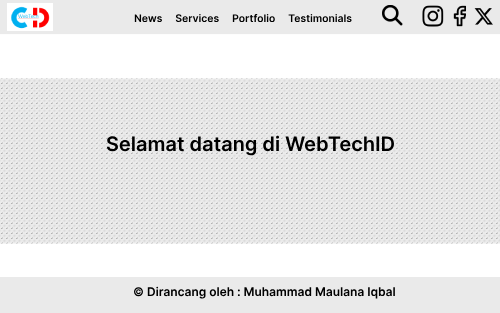
<style>
.page{position:relative;width:500px;height:313px;background:#eaeaea}
.page>*{position:absolute;margin:0}
.t1{font:10.4px "Inter-SemiBold";color:#000000}
.t2{font:20px "Inter-SemiBold";color:#000000}
.t3{font:12px "Inter-SemiBold";color:#000000}
</style>
<div class="page">
<p class="t1" style="left:134px;top:14px;width:218px;height:8px">News     Services     Portfolio     Testimonials</p>
<p class="t2" style="left:106px;top:135px;width:288px;height:21px">Selamat datang di WebTechID</p>
<p class="t3" style="left:133px;top:286px;width:262px;height:13px">© Dirancang oleh : Muhammad Maulana Iqbal</p>
</div>
